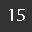
<style>
.page{position:relative;width:32px;height:32px;background:#333333}
.page>*{position:absolute;margin:0}
.t1{font:17.8px "MyriadPro-Regular";color:#ffffff;scale:1.12 1}
</style>
<div class="page">
<p class="t1" style="left:9px;top:9px;width:16px;height:12px">15</p>
</div>
